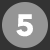
<style>
.page{position:relative;width:50px;height:50px;background:#959595}
.page>*{position:absolute;margin:0}
.t1{font:30px "AvenirNext-Bold";letter-spacing:-0.01em;color:#ffffff}
</style>
<div class="page">
<p class="t1" style="left:16px;top:14px;width:17px;height:23px">5</p>
</div>
